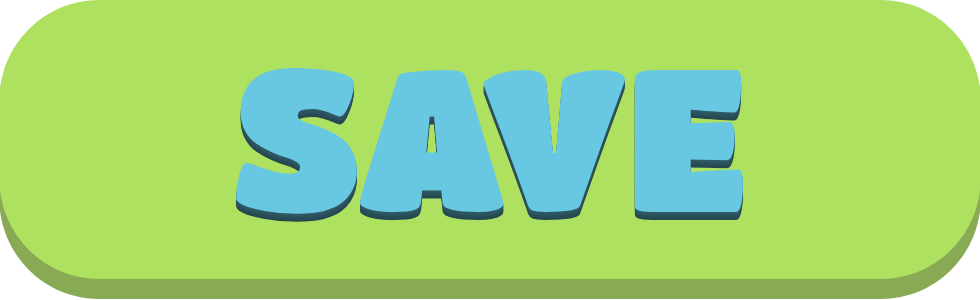
<style>
.page{position:relative;width:980px;height:300px;background:#afe160}
.page>*{position:absolute;margin:0}
.t1{font:200px "TitanOne";color:#69c8e1}
</style>
<div class="page">
<p class="t1" style="left:236px;top:68px;width:507px;height:146px">SAVE</p>
</div>
